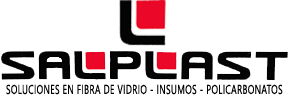
<style>
.page{position:relative;width:289px;height:100px;background:#ffffff}
.page>*{position:absolute;margin:0}
.t1{font:12.9px "LeelawadeeUI";letter-spacing:0.05em;color:#000000;scale:0.66 1}
</style>
<div class="page">
<p class="t1" style="left:6px;top:84px;width:277px;height:11px">SOLUCIONES EN FIBRA DE VIDRIO - INSUMOS - POLICARBONATOS</p>
</div>
